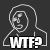
<style>
.page{position:relative;width:50px;height:50px;background:#333333}
.page>*{position:absolute;margin:0}
.t1{font:13.9px "Impact";color:#ffffff;scale:1.05 1}
</style>
<div class="page">
<p class="t1" style="left:9px;top:37px;width:33px;height:11px">WTF?</p>
</div>
